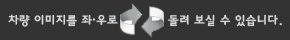
<style>
.page{position:relative;width:290px;height:40px;background:#333333}
.page>*{position:absolute;margin:0}
.t1{font:12px "HaanYGodic25";color:#d6d6d6}
</style>
<div class="page">
<p class="t1" style="left:8px;top:14px;width:274px;height:13px">차량 이미지를 좌·우로            돌려 보실 수 있습니다.</p>
</div>
